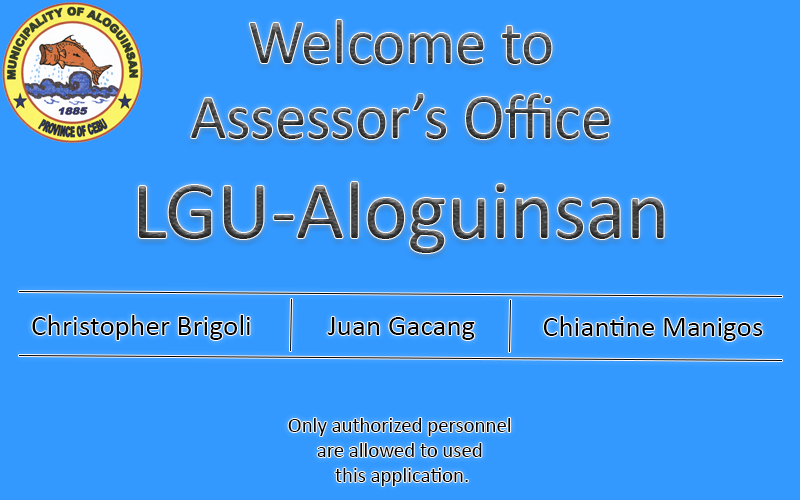
<style>
.page{position:relative;width:800px;height:500px;background:#3399ff}
.page>*{position:absolute;margin:0}
.t1{font:62.5px "Calibri"}
.t2{font:83.3px "Calibri"}
.t3{font:29.2px "Calibri";color:#020202}
.t4{font:20.8px "Calibri";color:#020202}
</style>
<div class="page">
<p class="t1" style="left:139px;top:20px;width:525px;height:233px;text-align:center">Welcome to<br>Assessor’s Office<br><span class="t2">LGU-Aloguinsan</span></p>
<p class="t3" style="left:32px;top:315px;width:218px;height:25px">Christopher Brigoli</p>
<p class="t3" style="left:327px;top:317px;width:148px;height:23px">Juan Gacang</p>
<p class="t3" style="left:543px;top:316px;width:220px;height:25px">Chiantine Manigos</p>
<p class="t4" style="left:288px;top:418px;width:223px;height:68px;text-align:center">Only authorized personnel <br>are allowed to used <br>this application.</p>
</div>
